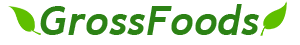
<style>
.page{position:relative;width:300px;height:45px;background:#ffffff}
.page>*{position:absolute;margin:0}
.t1{font:41.2px "Trebuchet-BoldItalic";color:#2c8215}
</style>
<div class="page">
<p class="t1" style="left:40px;top:4px;width:220px;height:31px">GrossFoods</p>
</div>
